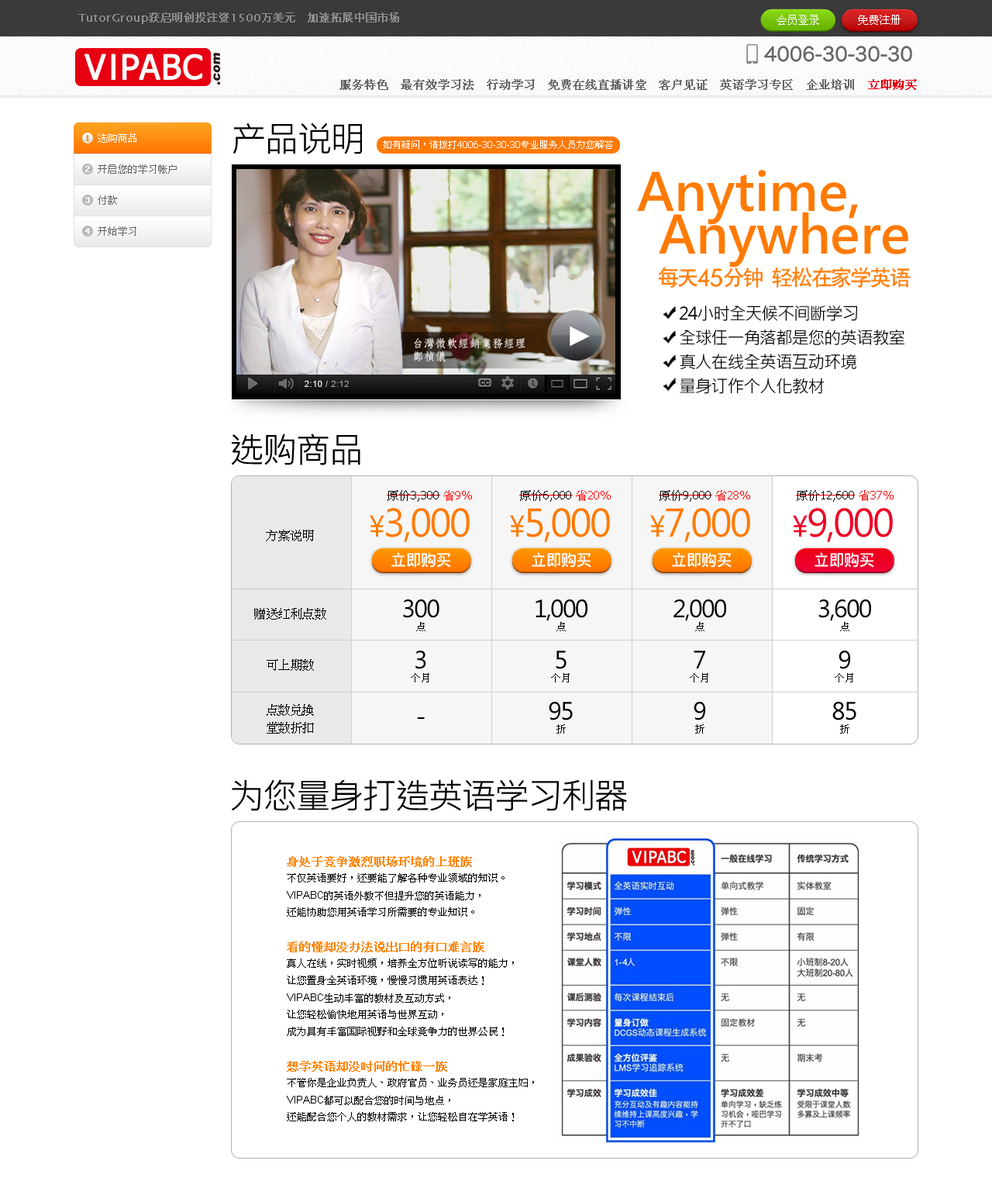
<style>
.page{position:relative;width:992px;height:1202px;background:#ffffff}
.page>*{position:absolute;margin:0}
.t1{font:34.9px "MicrosoftJhengHeiRegular";letter-spacing:-0.05em;color:#000000}
.t2{font:8.5px "Tahoma";color:#ff9000;font-weight:bold}
.t3{font:10.1px "PMingLiU";color:#ffffff}
.t4{font:9.3px "Tahoma";color:#ffffff}
.t5{font:9.3px "PMingLiU";color:#ffffff}
.t6{font:8.5px "Tahoma";color:#ffffff;font-weight:bold}
.t7{font:10.1px "PMingLiU";color:#636363}
.t8{font:51.7px "MicrosoftJhengHeiBold";color:#ff7a03}
.t9{font:21.3px "ç»å¸é»ä½ç®-regular";letter-spacing:-0.075em;color:#ff7a03}
.t10{font:23.5px "FuturaBT-Light";letter-spacing:-0.075em;color:#ff7a03;font-weight:bold}
.t11{font:17px/24.2px "MicrosoftJhengHeiRegular";letter-spacing:-0.05em;color:#000000}
.t12{font:11.6px "Tahoma";color:#000000}
.t13{font:11.6px "PMingLiU";color:#000000}
.t14{font:11.6px "PMingLiU";color:#ff0000}
.t15{font:11.6px "Tahoma";color:#ff0000}
.t16{font:37.2px "MicrosoftJhengHeiRegular";letter-spacing:-0.05em;color:#ff7a03}
.t17{font:27.9px "MicrosoftJhengHeiRegular";letter-spacing:-0.05em;color:#ff7a03}
.t18{font:37.2px "MicrosoftJhengHeiRegular";letter-spacing:-0.05em;color:#ed0025}
.t19{font:27.9px "MicrosoftJhengHeiRegular";letter-spacing:-0.05em;color:#ed0025}
.t20{font:12.4px "PMingLiU";letter-spacing:-0.025em;color:#000000}
.t21{font:15.5px "¾­µäÆ½ºÚ¼ò Regular";letter-spacing:-0.025em;color:#ffffff}
.t22{font:23.3px/25.6px "MicrosoftJhengHeiRegular";letter-spacing:-0.05em;color:#000000}
.t23{font:23.3px/27.9px "MicrosoftJhengHeiRegular";letter-spacing:-0.05em;color:#000000}
.t24{font:12.4px/8.9px "PMingLiU";letter-spacing:-0.025em;color:#000000}
.t25{font:10.1px/25.6px "PMingLiU";letter-spacing:-0.05em;color:#000000}
.t26{font:10.1px/17.1px "PMingLiU";color:#000000}
.t27{font:11.6px/17.1px "PMingLiU";color:#ff8300;font-weight:bold}
.t28{font:10.1px/17.1px "ArialMT";color:#000000}
</style>
<div class="page">
<p class="t1" style="left:233px;top:122px;width:129px;height:32px">产品说明</p>
<p class="t2" style="left:86px;top:135px;width:3px;height:6px">1</p>
<p class="t3" style="left:98px;top:133px;width:38px;height:10px">选购商品</p>
<p class="t4" style="left:383px;top:140px;width:230px;height:9px"><span class="t5">如有疑问，请拨打</span>4006-30-30-30<span class="t5">专业服务人员为您解答</span></p>
<p class="t6" style="left:85px;top:166px;width:5px;height:6px">2</p>
<p class="t7" style="left:98px;top:164px;width:79px;height:10px">开启您的学习帐户</p>
<p class="t8" style="left:637px;top:170px;width:221px;height:55px">Anytime,</p>
<p class="t6" style="left:85px;top:197px;width:5px;height:6px">3</p>
<p class="t7" style="left:98px;top:195px;width:19px;height:10px">付款</p>
<p class="t8" style="left:659px;top:212px;width:250px;height:55px">Anywhere</p>
<p class="t6" style="left:85px;top:228px;width:5px;height:6px">4</p>
<p class="t7" style="left:98px;top:226px;width:38px;height:10px">开始学习</p>
<p class="t9" style="left:658px;top:267px;width:253px;height:21px">每天   分钟 轻松在家学英语</p>
<p class="t10" style="left:698px;top:268px;width:25px;height:19px">45</p>
<p class="t11" style="left:680px;top:305px;width:225px;height:89px">24小时全天候不间断学习<br>全球任一角落都是您的英语教室<br>真人在线全英语互动环境<br>量身订作个人化教材</p>
<p class="t1" style="left:231px;top:433px;width:129px;height:32px">选购商品</p>
<p class="t12" style="left:388px;top:490px;width:84px;height:12px"><span class="t13">原价</span>3,300 <span class="t14">省</span><span class="t15">9%</span></p>
<p class="t12" style="left:520px;top:490px;width:91px;height:12px"><span class="t13">原价</span>6,000 <span class="t14">省</span><span class="t15">20%</span></p>
<p class="t12" style="left:660px;top:490px;width:90px;height:12px"><span class="t13">原价</span>9,000 <span class="t14">省</span><span class="t15">28%</span></p>
<p class="t12" style="left:797px;top:490px;width:97px;height:12px"><span class="t13">原价</span>12,600 <span class="t14">省</span><span class="t15">37%</span></p>
<p class="t16" style="left:370px;top:508px;width:100px;height:34px"><span class="t17">¥</span>3,000</p>
<p class="t16" style="left:510px;top:508px;width:100px;height:34px"><span class="t17">¥</span>5,000</p>
<p class="t16" style="left:650px;top:508px;width:100px;height:34px"><span class="t17">¥</span>7,000</p>
<p class="t18" style="left:793px;top:508px;width:100px;height:34px"><span class="t19">¥</span>9,000</p>
<p class="t20" style="left:266px;top:530px;width:48px;height:11px">方案说明</p>
<p class="t21" style="left:392px;top:552px;width:59px;height:15px">立即购买</p>
<p class="t21" style="left:532px;top:552px;width:60px;height:15px">立即购买</p>
<p class="t21" style="left:672px;top:552px;width:60px;height:15px">立即购买</p>
<p class="t21" style="left:815px;top:552px;width:59px;height:15px">立即购买</p>
<p class="t22" style="left:403px;top:599px;width:37px;height:120px;text-align:center">300<br><br>3<br><br><span class="t23">-</span></p>
<p class="t22" style="left:536px;top:599px;width:52px;height:121px;text-align:center">1,000<br><br>5<br><br>95</p>
<p class="t22" style="left:674px;top:599px;width:52px;height:121px;text-align:center">2,000<br><br>7<br><br>9</p>
<p class="t22" style="left:819px;top:599px;width:52px;height:121px;text-align:center">3,600<br><br>9<br><br>85</p>
<p class="t24" style="left:254px;top:608px;width:72px;height:125px;text-align:center">赠送红利点数<br><br><br><br><br><br>可上期数<br><br><br><br><br>点数兑换<br><br>堂数折扣</p>
<p class="t25" style="left:411px;top:622px;width:18px;height:60px;text-align:center">点<br><br>个月</p>
<p class="t25" style="left:551px;top:622px;width:19px;height:111px;text-align:center">点<br><br>个月<br><br>折</p>
<p class="t25" style="left:690px;top:622px;width:19px;height:111px;text-align:center">点<br><br>个月<br><br>折</p>
<p class="t25" style="left:835px;top:622px;width:19px;height:111px;text-align:center">点<br><br>个月<br><br>折</p>
<p class="t1" style="left:232px;top:779px;width:395px;height:32px">为您量身打造英语学习利器</p>
<p class="t26" style="left:287px;top:856px;width:247px;height:265px"><span class="t27">身处于竞争激烈职场环境的上班族<br></span>不仅英语要好，还要能了解各种专业领域的知识。<br><span class="t28">VIPABC</span>的英语外教不但提升您的英语能力，<br>还能协助您用英语学习所需要的专业知识。<br><br><span class="t27">看的懂却没办法说出口的有口难言族<br></span>真人在线，实时视频，培养全方位听说读写的能力，<br>让您置身全英语环境，慢慢习惯用英语表达！<br><span class="t28">VIPABC</span>生动丰富的教材及互动方式，<br>让您轻松愉快地用英语与世界互动，<br>成为具有丰富国际视野和全球竞争力的世界公民！<br><br><span class="t27">想学英语却没时间的忙碌一族<br></span>不管你是企业负责人、政府官员、业务员还是家庭主妇，<br><span class="t28">VIPABC</span>都可以配合您的时间与地点，<br>还能配合您个人的教材需求，让您轻松自在学英语！</p>
</div>
